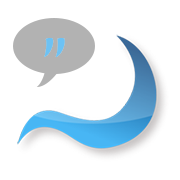
<style>
.page{position:relative;width:180px;height:180px;background:#ffffff}
.page>*{position:absolute;margin:0}
.t1{font:70px "FertigoPro-Regular";color:#6dc2f4}
</style>
<div class="page">
<p class="t1" style="left:44px;top:38px;width:21px;height:19px">„</p>
</div>
